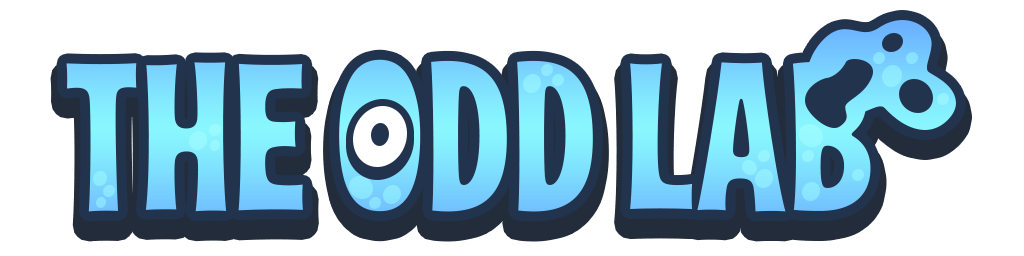
<style>
.page{position:relative;width:1024px;height:256px;background:#ffffff}
.page>*{position:absolute;margin:0}
.t1{font:214.1px "LasVegas-Jackpot";color:#80e2fe;scale:1.11 1}
</style>
<div class="page">
<p class="t1" style="left:66px;top:59px;width:805px;height:153px">THE ODD LAB</p>
</div>
